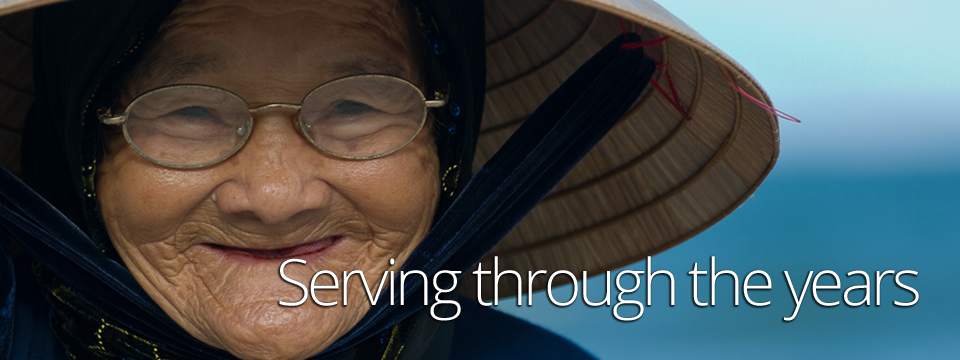
<style>
.page{position:relative;width:960px;height:360px}
.page>*{position:absolute;margin:0}
.t1{font:64px "OpenSans-Light";letter-spacing:-0.06em;color:#ffffff}
</style>
<div class="page">
<p class="t1" style="left:279px;top:256px;width:640px;height:65px">Serving through the years</p>
</div>
